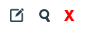
<style>
.page{position:relative;width:85px;height:30px;background:#ffffff}
.page>*{position:absolute;margin:0}
.t1{font:18.6px "Arial-BoldMT";letter-spacing:0.02em;color:#fe0000}
</style>
<div class="page">
<p class="t1" style="left:64px;top:10px;width:11px;height:11px">x</p>
</div>
